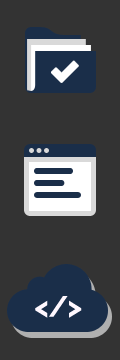
<style>
.page{position:relative;width:120px;height:360px;background:#333333}
.page>*{position:absolute;margin:0}
.t1{font:29.1px "Raleway-Bold";letter-spacing:-0.015em;color:#fff8ff}
</style>
<div class="page">
<p class="t1" style="left:35px;top:296px;width:47px;height:22px">&lt;/&gt;</p>
</div>
